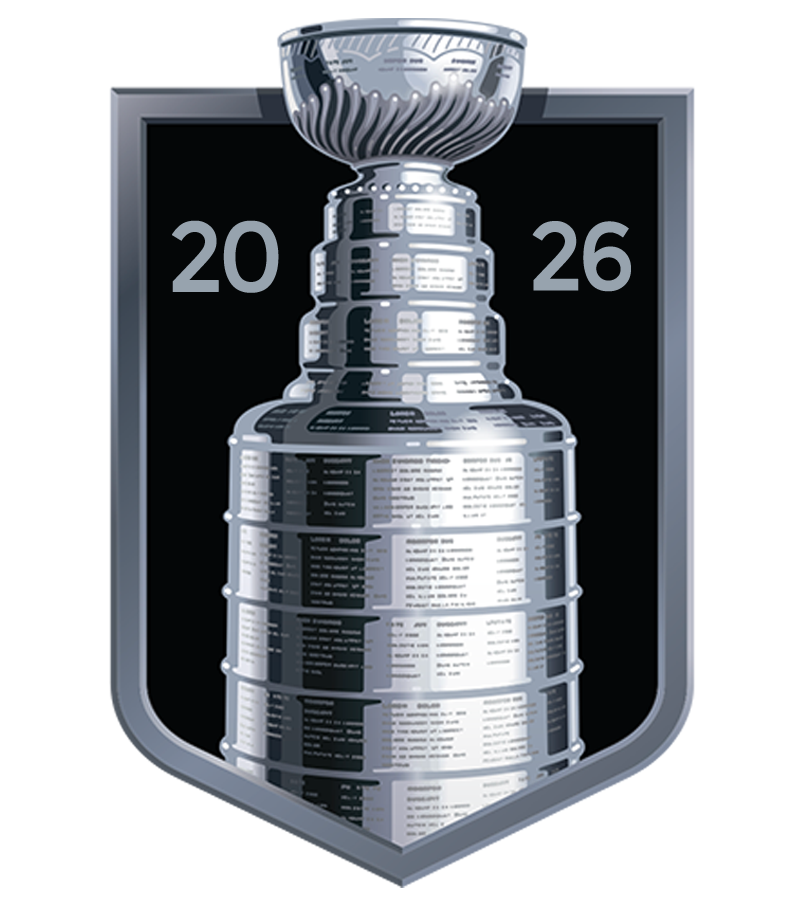
<style>
.page{position:relative;width:805px;height:905px;background:#ffffff}
.page>*{position:absolute;margin:0}
.t1{font:98.4px "Montserrat-Regular";letter-spacing:-0.075em;color:#97a3ae;font-weight:bold;scale:0.96 1}
.t2{font:96px "Montserrat-Regular";letter-spacing:-0.075em;color:#97a3ae;font-weight:bold;scale:0.96 1}
</style>
<div class="page">
<p class="t1" style="left:172px;top:220px;width:107px;height:73px">20</p>
<p class="t2" style="left:532px;top:221px;width:99px;height:71px">26</p>
</div>
